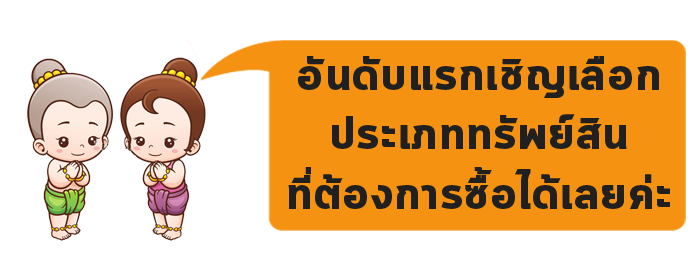
<style>
.page{position:relative;width:700px;height:280px;background:#ffffff}
.page>*{position:absolute;margin:0}
.t1{font:46.9px "Cloud-Bold";letter-spacing:0.01em;color:#202020;scale:1.05 1}
</style>
<div class="page">
<p class="t1" style="left:288px;top:56px;width:382px;height:153px;text-align:center">อันดับแรกเชิญเลือก<br>ประเภททรัพย์สิน<br>ที่ต้องการซื้อได้เลยค่ะ</p>
</div>
